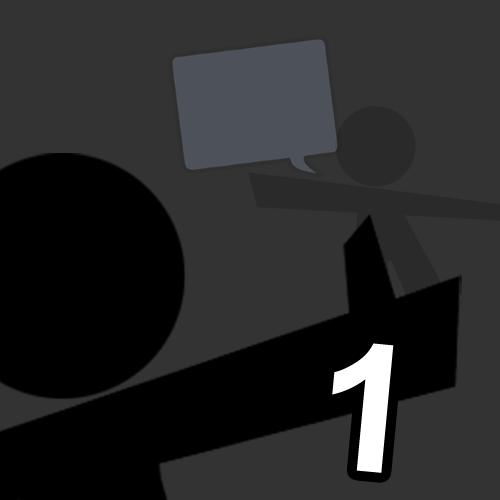
<style>
.page{position:relative;width:500px;height:500px;background:#333333}
.page>*{position:absolute;margin:0}
.t1{font:177.7px "Arial-BoldMT";color:#ffffff}
</style>
<div class="page">
<p class="t1" style="left:332px;top:343px;width:62px;height:130px;rotate:5deg">1</p>
</div>
